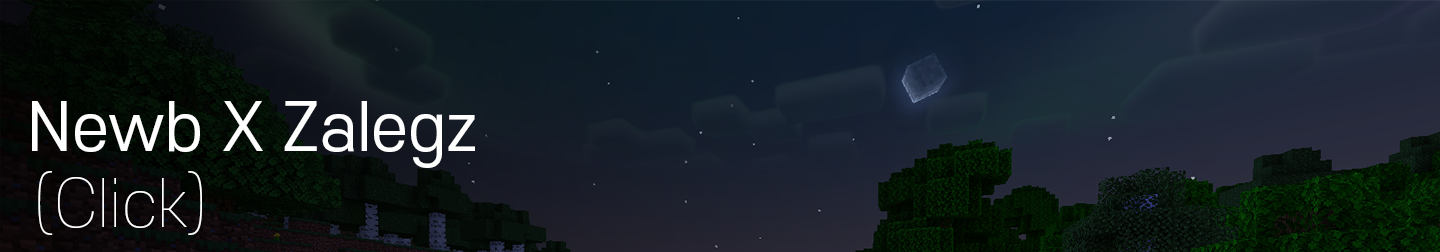
<style>
.page{position:relative;width:1440px;height:252px}
.page>*{position:absolute;margin:0}
.t1{font:64px "S-CoreDream-4Regular";color:#ffffff}
.t2{font:64px "S-CoreDream-1Thin";color:#ffffff}
</style>
<div class="page">
<p class="t1" style="left:32px;top:101px;width:443px;height:67px">Newb X Zalegz</p>
<p class="t2" style="left:38px;top:171px;width:164px;height:64px">(Click)</p>
</div>
